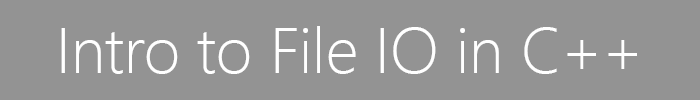
<style>
.page{position:relative;width:700px;height:100px;background:#939393}
.page>*{position:absolute;margin:0}
.t1{font:64px "SegoeUI-Light";color:#ffffff}
</style>
<div class="page">
<p class="t1" style="left:61px;top:26px;width:576px;height:48px">Intro to File IO in C++</p>
</div>
